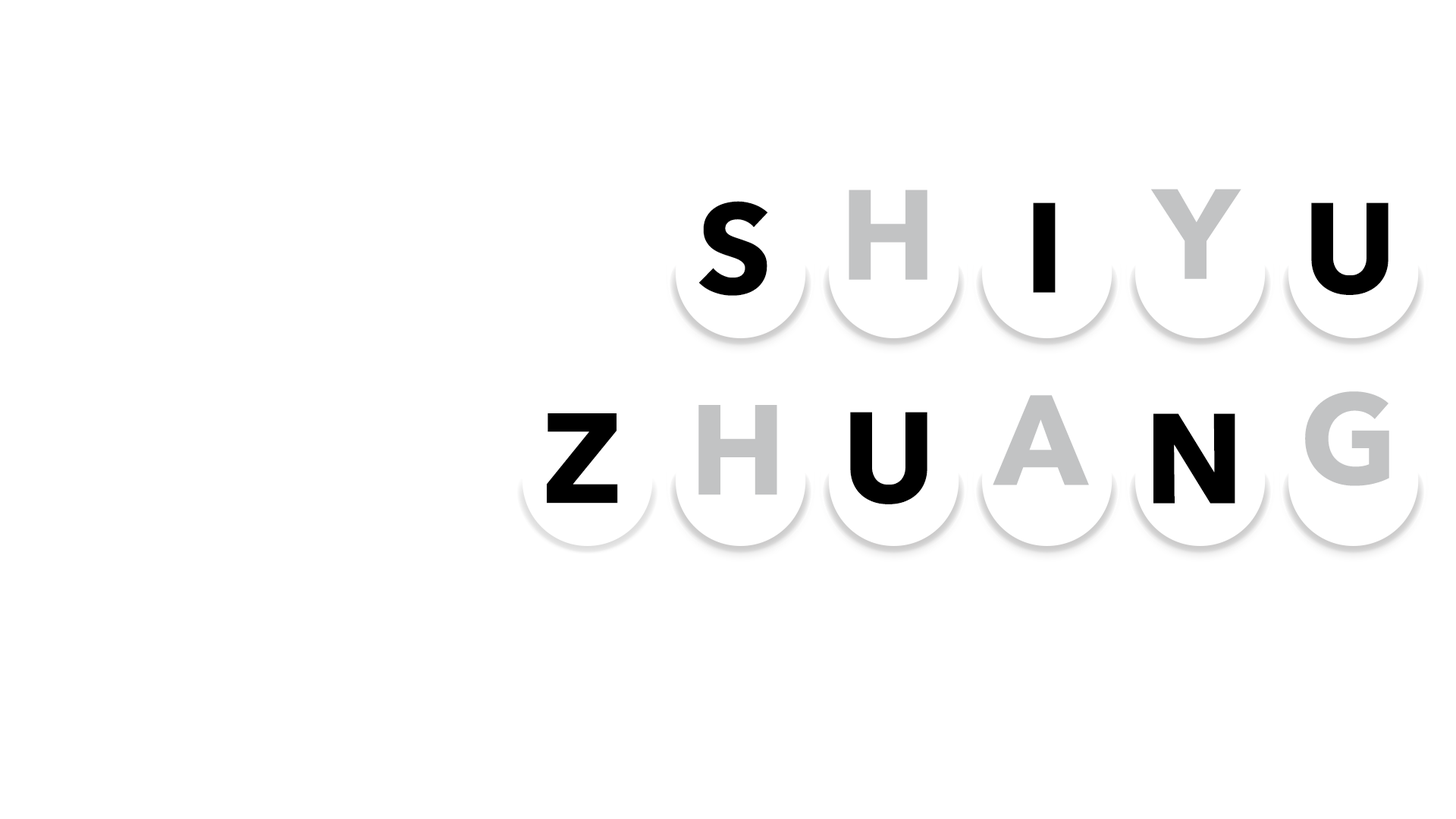
<style>
.page{position:relative;width:1456px;height:819px;background:#ffffff}
.page>*{position:absolute;margin:0}
.t1{font:126.4px "AvenirNext-Bold";color:#c2c3c4}
.t2{font:126.4px "AvenirNext-Bold";color:#000000}
</style>
<div class="page">
<p class="t1" style="left:849px;top:190px;width:78px;height:90px">H</p>
<p class="t1" style="left:1151px;top:189px;width:90px;height:90px">Y</p>
<p class="t2" style="left:698px;top:201px;width:70px;height:95px">S</p>
<p class="t2" style="left:1033px;top:202px;width:23px;height:91px">I</p>
<p class="t2" style="left:1311px;top:202px;width:77px;height:93px">U</p>
<p class="t1" style="left:993px;top:395px;width:96px;height:90px">A</p>
<p class="t1" style="left:1305px;top:391px;width:84px;height:95px">G</p>
<p class="t2" style="left:547px;top:413px;width:71px;height:91px">Z</p>
<p class="t1" style="left:698px;top:405px;width:79px;height:90px">H</p>
<p class="t2" style="left:850px;top:412px;width:77px;height:92px">U</p>
<p class="t2" style="left:1153px;top:413px;width:82px;height:91px">N</p>
</div>
